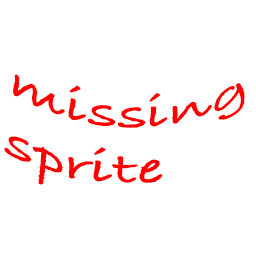
<style>
.page{position:relative;width:256px;height:256px;background:#ffffff}
.page>*{position:absolute;margin:0}
.t1{font:51.8px "BradleyHandITCTT-Bold";color:#ff0000}
</style>
<div class="page">
<p class="t1" style="left:4px;top:74px;width:241px;height:111px">missing<br>sprite</p>
</div>
